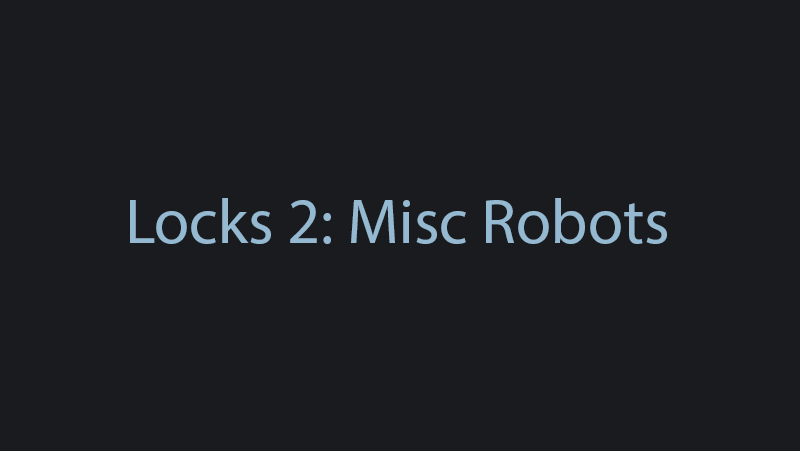
<style>
.page{position:relative;width:800px;height:451px;background:#1a1b1f}
.page>*{position:absolute;margin:0}
.t1{font:64px "OpenSans-Semibold";color:#94b9d1}
</style>
<div class="page">
<p class="t1" style="left:130px;top:198px;width:537px;height:46px">Locks 2: Misc Robots</p>
</div>
